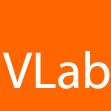
<style>
.page{position:relative;width:111px;height:111px;background:#ff6600}
.page>*{position:absolute;margin:0}
.t1{font:52px "MyriadPro-Regular";color:#ffffff}
</style>
<div class="page">
<p class="t1" style="left:3px;top:51px;width:107px;height:38px">VLab</p>
</div>
